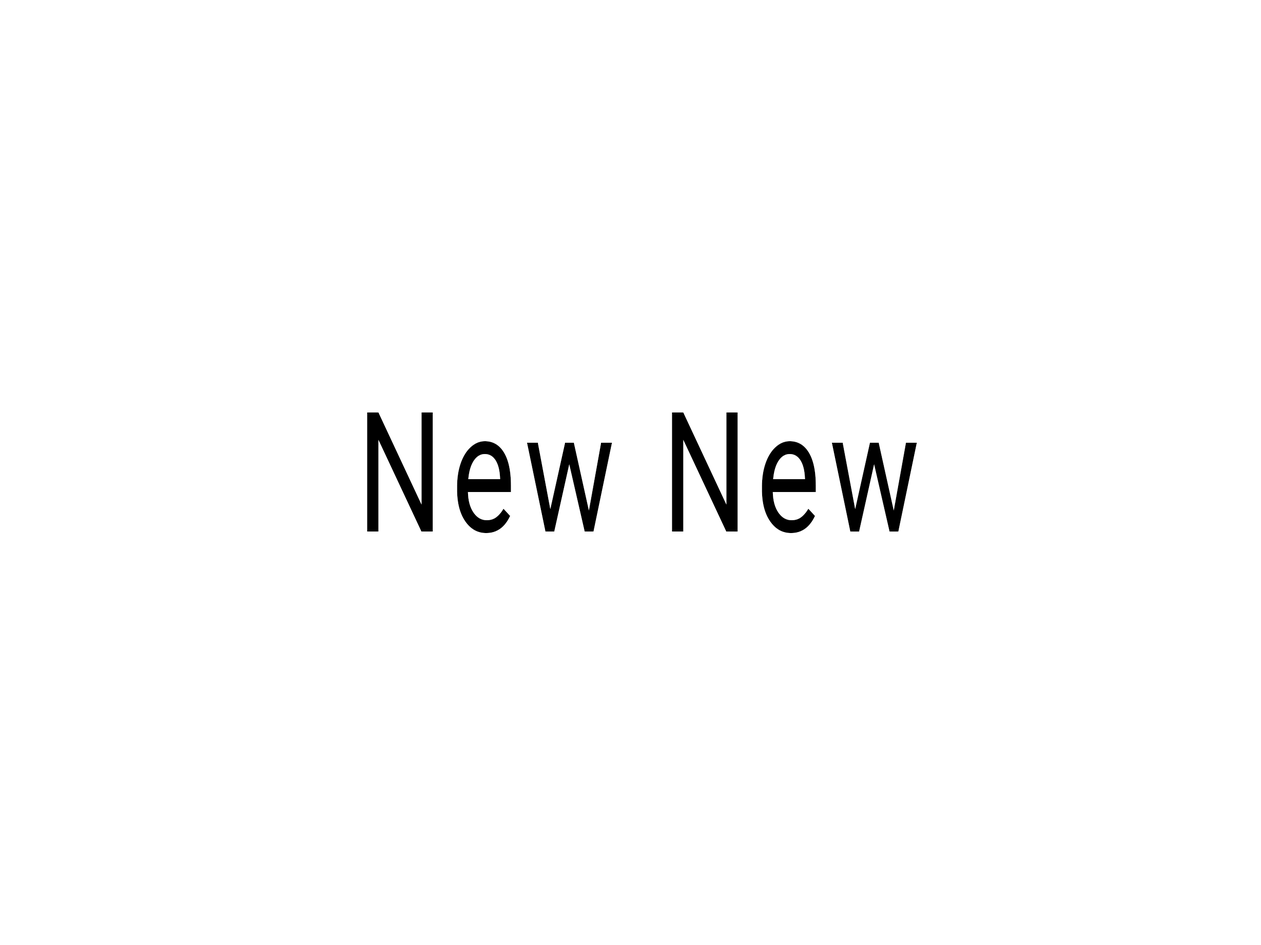
<style>
.page{position:relative;width:1261px;height:945px;background:#ffffff}
.page>*{position:absolute;margin:0}
.t1{font:168px "Roboto-Regular";letter-spacing:0.075em;color:#000000;scale:0.71 1}
</style>
<div class="page">
<p class="t1" style="left:367px;top:413px;width:550px;height:120px">New New</p>
</div>
